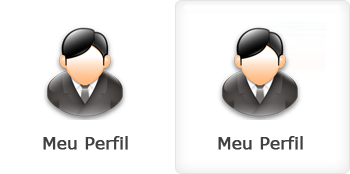
<style>
.page{position:relative;width:350px;height:174px;background:#ffffff}
.page>*{position:absolute;margin:0}
.t1{font:16.7px "Verdana";color:#404040;font-weight:bold}
</style>
<div class="page">
<p class="t1" style="left:43px;top:136px;width:85px;height:14px">Meu Perfil</p>
<p class="t1" style="left:218px;top:136px;width:85px;height:14px">Meu Perfil</p>
</div>
